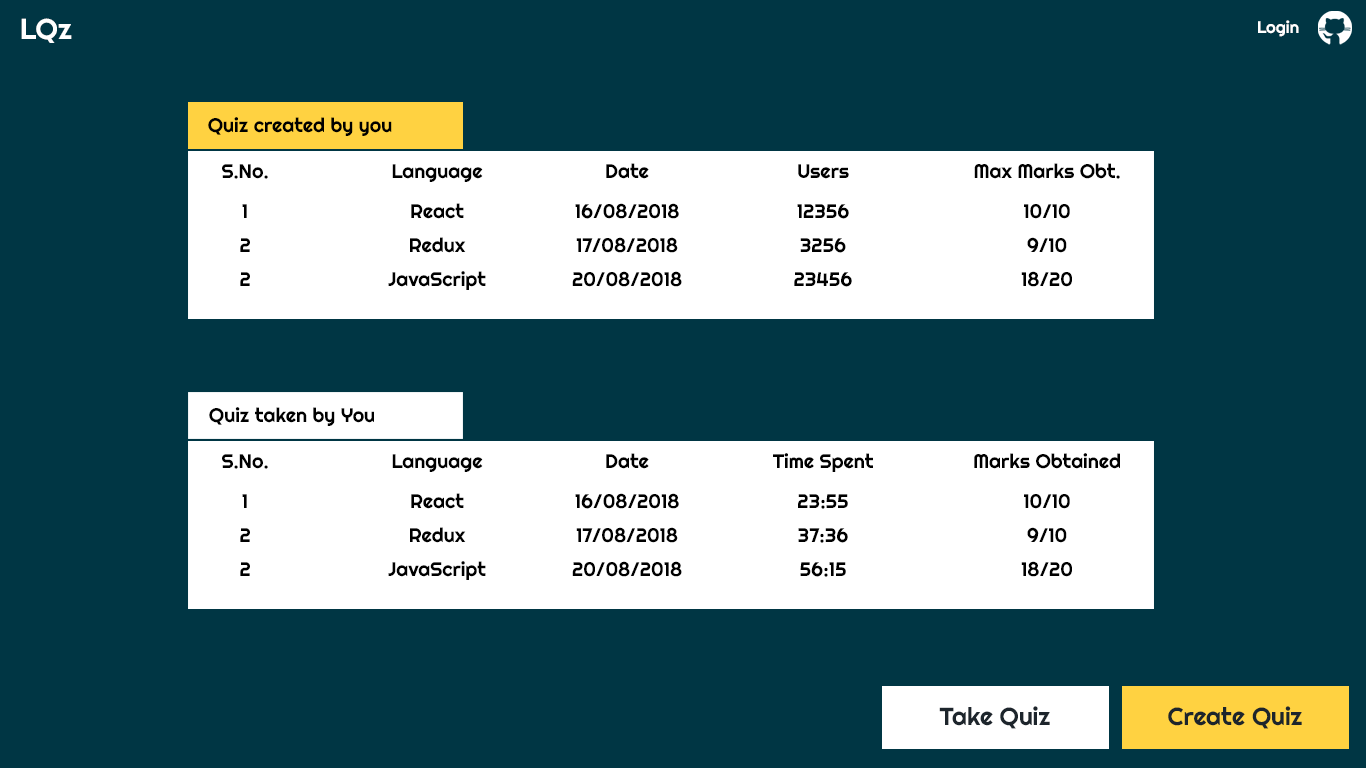
<style>
.page{position:relative;width:1366px;height:768px;background:#003644}
.page>*{position:absolute;margin:0}
.t1{font:28.7px "Righteous-Regular";color:#ffffff}
.t2{font:16.7px "Righteous-Regular";color:#ffffff}
.t3{font:19.7px "Righteous-Regular";color:#000000}
.t4{font:24.7px "Righteous-Regular";color:#1d252c}
</style>
<div class="page">
<p class="t1" style="left:21px;top:18px;width:51px;height:25px">LQz</p>
<p class="t2" style="left:1258px;top:20px;width:41px;height:17px">Login</p>
<p class="t3" style="left:208px;top:117px;width:184px;height:19px">Quiz created by you</p>
<p class="t3" style="left:222px;top:164px;width:46px;height:15px">S.No.</p>
<p class="t3" style="left:392px;top:164px;width:91px;height:18px">Language</p>
<p class="t3" style="left:606px;top:163px;width:43px;height:16px">Date</p>
<p class="t3" style="left:798px;top:164px;width:51px;height:15px">Users</p>
<p class="t3" style="left:974px;top:163px;width:146px;height:16px">Max Marks Obt.</p>
<p class="t3" style="left:242px;top:204px;width:5px;height:14px">1</p>
<p class="t3" style="left:411px;top:203px;width:53px;height:16px">React</p>
<p class="t3" style="left:575px;top:203px;width:104px;height:16px">16/08/2018</p>
<p class="t3" style="left:797px;top:204px;width:52px;height:15px">12356</p>
<p class="t3" style="left:1024px;top:204px;width:46px;height:15px">10/10</p>
<p class="t3" style="left:240px;top:238px;width:10px;height:14px">2</p>
<p class="t3" style="left:410px;top:237px;width:56px;height:16px">Redux</p>
<p class="t3" style="left:576px;top:237px;width:102px;height:16px">17/08/2018</p>
<p class="t3" style="left:800px;top:238px;width:46px;height:15px">3256</p>
<p class="t3" style="left:1027px;top:237px;width:40px;height:16px">9/10</p>
<p class="t3" style="left:240px;top:272px;width:10px;height:14px">2</p>
<p class="t3" style="left:388px;top:271px;width:98px;height:19px">JavaScript</p>
<p class="t3" style="left:572px;top:271px;width:110px;height:16px">20/08/2018</p>
<p class="t3" style="left:794px;top:272px;width:58px;height:15px">23456</p>
<p class="t3" style="left:1021px;top:271px;width:51px;height:16px">18/20</p>
<p class="t3" style="left:209px;top:407px;width:165px;height:19px">Quiz taken by You</p>
<p class="t3" style="left:222px;top:454px;width:46px;height:15px">S.No.</p>
<p class="t3" style="left:392px;top:454px;width:91px;height:18px">Language</p>
<p class="t3" style="left:606px;top:453px;width:43px;height:16px">Date</p>
<p class="t3" style="left:773px;top:453px;width:100px;height:19px">Time Spent</p>
<p class="t3" style="left:974px;top:453px;width:146px;height:16px">Marks Obtained</p>
<p class="t3" style="left:242px;top:494px;width:5px;height:14px">1</p>
<p class="t3" style="left:411px;top:493px;width:53px;height:16px">React</p>
<p class="t3" style="left:575px;top:493px;width:104px;height:16px">16/08/2018</p>
<p class="t3" style="left:798px;top:494px;width:50px;height:15px">23:55</p>
<p class="t3" style="left:1024px;top:494px;width:46px;height:15px">10/10</p>
<p class="t3" style="left:240px;top:528px;width:10px;height:14px">2</p>
<p class="t3" style="left:410px;top:527px;width:56px;height:16px">Redux</p>
<p class="t3" style="left:576px;top:527px;width:102px;height:16px">17/08/2018</p>
<p class="t3" style="left:798px;top:528px;width:50px;height:15px">37:36</p>
<p class="t3" style="left:1027px;top:527px;width:40px;height:16px">9/10</p>
<p class="t3" style="left:240px;top:562px;width:10px;height:14px">2</p>
<p class="t3" style="left:388px;top:561px;width:98px;height:19px">JavaScript</p>
<p class="t3" style="left:572px;top:561px;width:110px;height:16px">20/08/2018</p>
<p class="t3" style="left:800px;top:562px;width:46px;height:15px">56:15</p>
<p class="t3" style="left:1021px;top:561px;width:51px;height:16px">18/20</p>
<p class="t4" style="left:939px;top:706px;width:111px;height:23px">Take Quiz</p>
<p class="t4" style="left:1168px;top:706px;width:134px;height:23px">Create Quiz</p>
</div>
